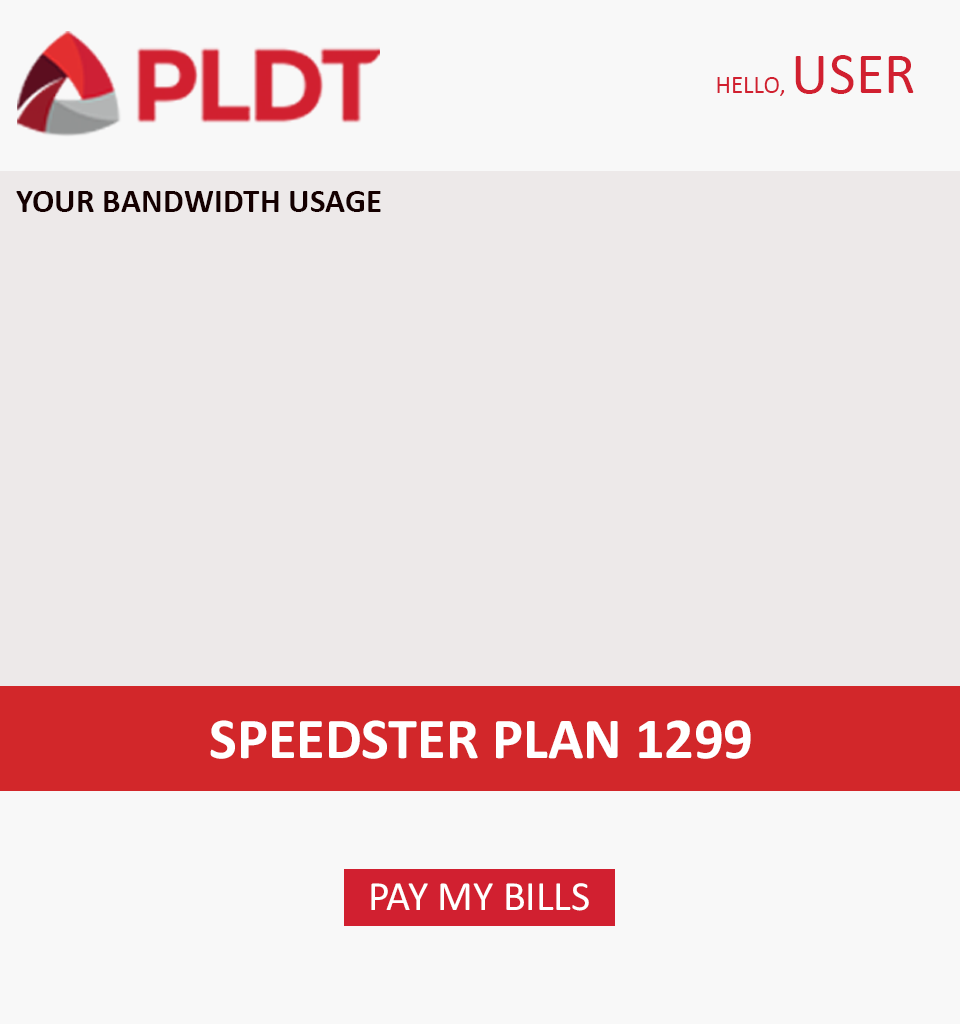
<style>
.page{position:relative;width:960px;height:1024px;background:#ede9e9}
.page>*{position:absolute;margin:0}
.t1{font:25px "Calibri";color:#d12030}
.t2{font:58.3px "Calibri";color:#d12030}
.t3{font:33.3px "Calibri-Bold";color:#150000}
.t4{font:57.9px "Calibri-Bold";color:#ffffff}
.t5{font:41.9px "Calibri";color:#ffffff}
</style>
<div class="page">
<p class="t1" style="left:717px;top:55px;width:197px;height:41px">HELLO, <span class="t2">USER</span></p>
<p class="t3" style="left:16px;top:191px;width:365px;height:21px">YOUR BANDWIDTH USAGE</p>
<p class="t4" style="left:210px;top:720px;width:541px;height:39px">SPEEDSTER PLAN 1299</p>
<p class="t5" style="left:371px;top:883px;width:218px;height:28px">PAY MY BILLS</p>
</div>
